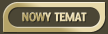
<style>
.page{position:relative;width:108px;height:34px;background:#4b4635}
.page>*{position:absolute;margin:0}
.t1{font:14px "Delicious-Heavy";letter-spacing:-0.05em}
</style>
<div class="page">
<p class="t1" style="left:22px;top:12px;width:65px;height:10px">NOWY TEMAT</p>
</div>
